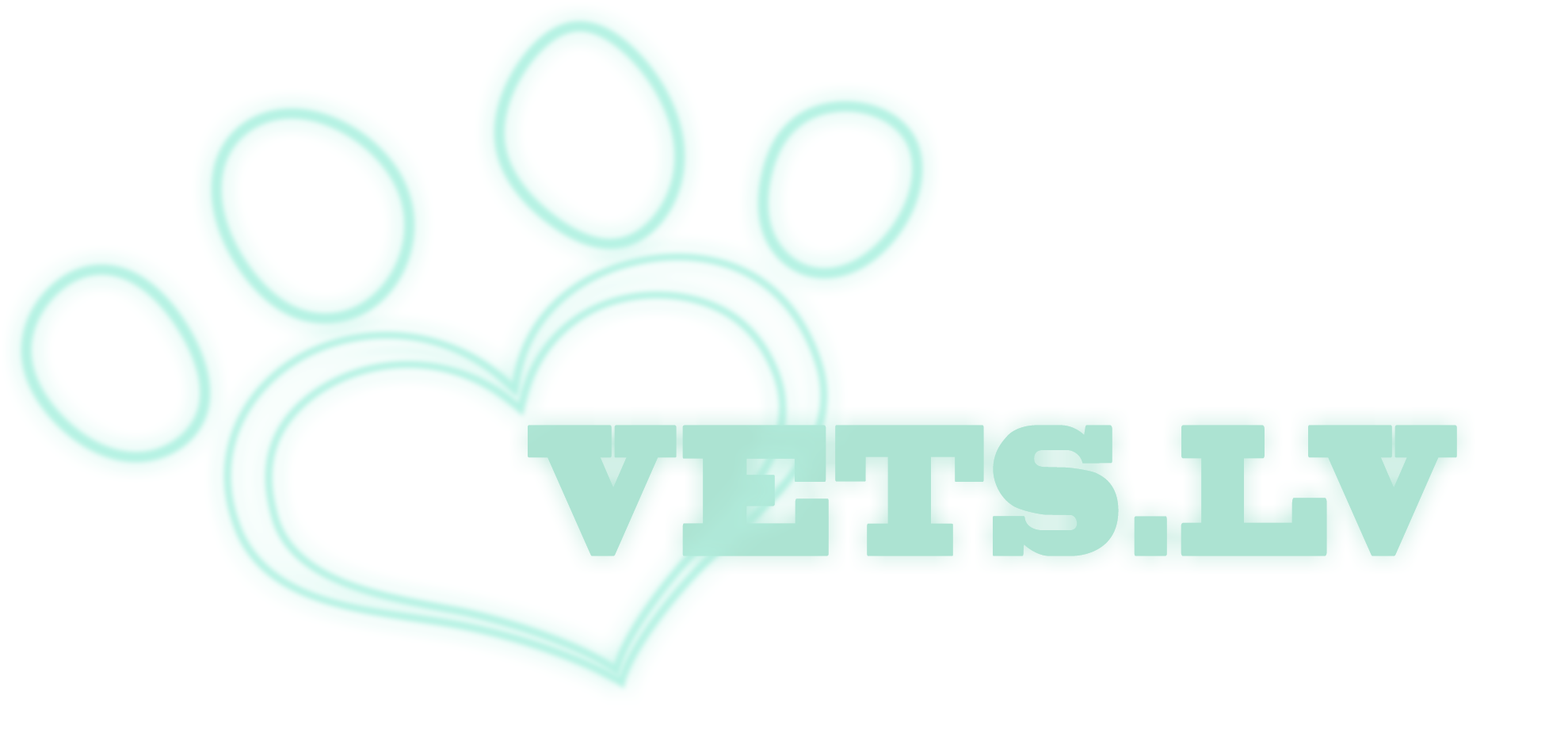
<style>
.page{position:relative;width:1568px;height:737px;background:#ffffff}
.page>*{position:absolute;margin:0}
.t1{font:174.1px "BlackoakStd";letter-spacing:0.04em;color:#ace3d2;scale:0.48 1}
</style>
<div class="page">
<p class="t1" style="left:528px;top:425px;width:929px;height:131px">VETS.LV</p>
</div>
